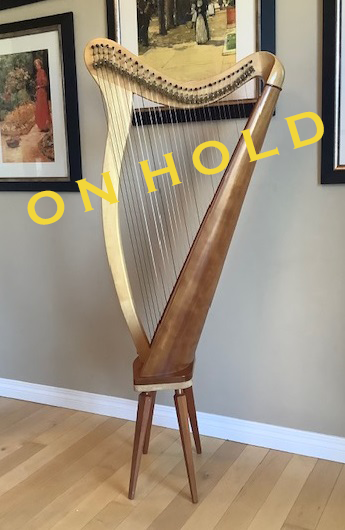
<style>
.page{position:relative;width:345px;height:530px}
.page>*{position:absolute;margin:0}
.t1{font:48px "CopperplateGothic-Bold";color:#f2d63a}
</style>
<div class="page">
<p class="t1" style="left:27px;top:111px;width:297px;height:114px;rotate:-17deg">O N  H O L D</p>
</div>
